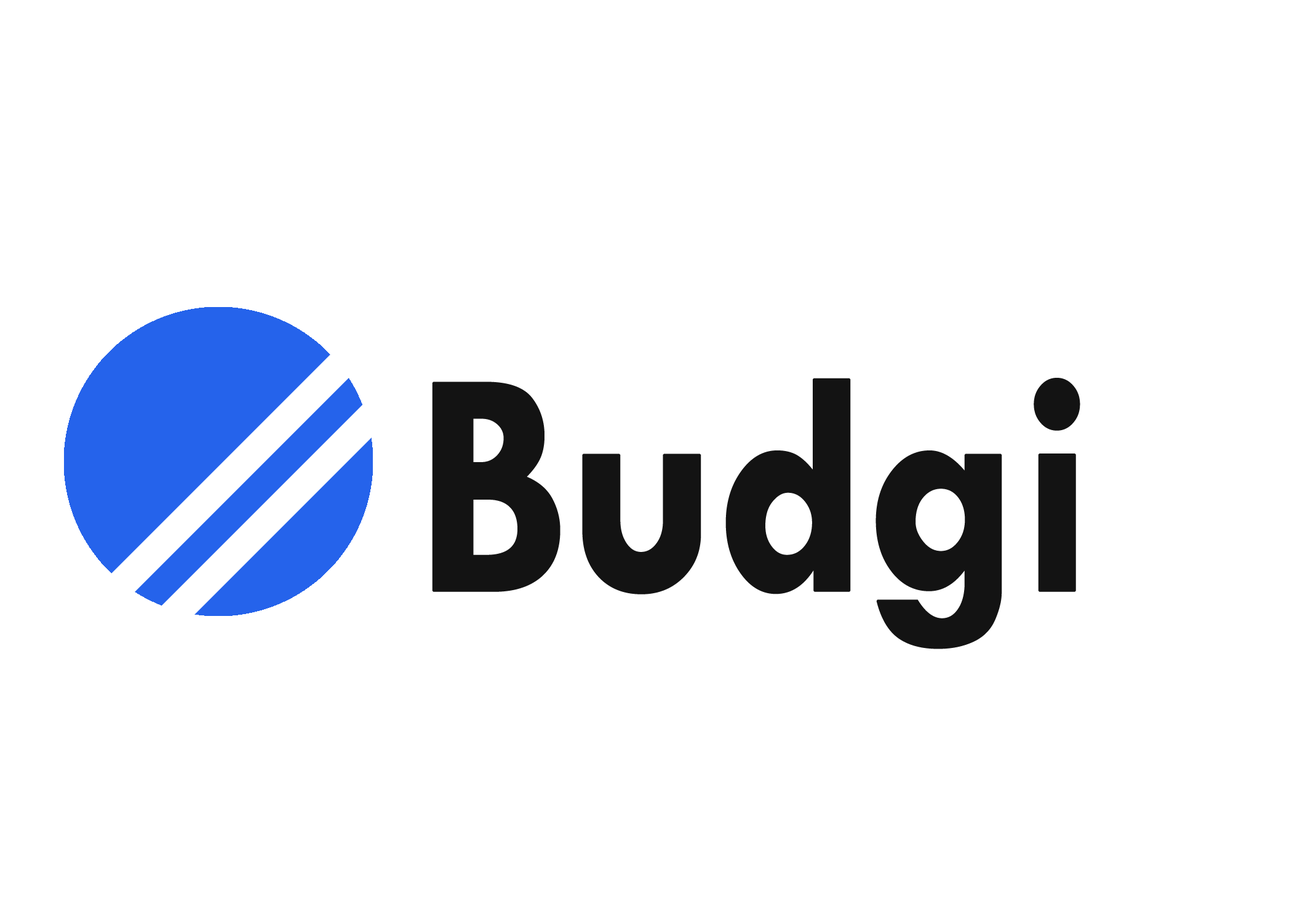
<style>
.page{position:relative;width:1292px;height:923px;background:#ffffff}
.page>*{position:absolute;margin:0}
.t1{font:324.3px "TwCenMT-Bold";letter-spacing:-0.02em;color:#131313;font-weight:bold;scale:0.87 1}
</style>
<div class="page">
<p class="t1" style="left:432px;top:378px;width:648px;height:271px">Budgi</p>
</div>
